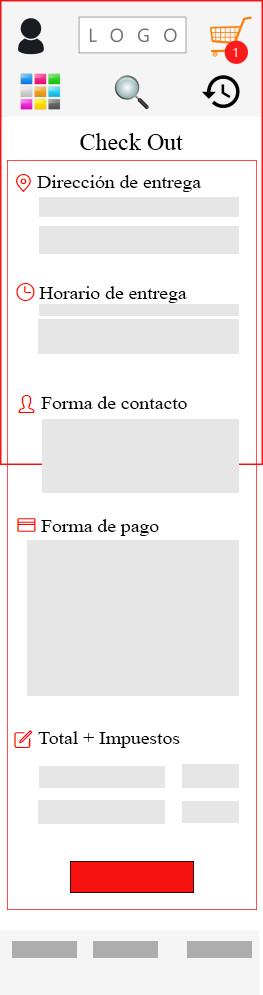
<style>
.page{position:relative;width:263px;height:995px;background:#ffffff}
.page>*{position:absolute;margin:0}
.t1{font:24px "TimesNewRomanPSMT";color:#000000}
.t2{font:17.6px "TimesNewRomanPSMT";color:#000000;scale:1.12 1}
</style>
<div class="page">
<p class="t1" style="left:80px;top:133px;width:103px;height:17px">Check Out</p>
<p class="t2" style="left:37px;top:175px;width:165px;height:17px">Dirección de entrega</p>
<p class="t2" style="left:39px;top:286px;width:148px;height:17px">Horario de entrega</p>
<p class="t2" style="left:41px;top:396px;width:146px;height:13px">Forma de contacto</p>
<p class="t2" style="left:41px;top:519px;width:118px;height:17px">Forma de pago</p>
<p class="t2" style="left:38px;top:731px;width:142px;height:17px">Total + Impuestos</p>
</div>
